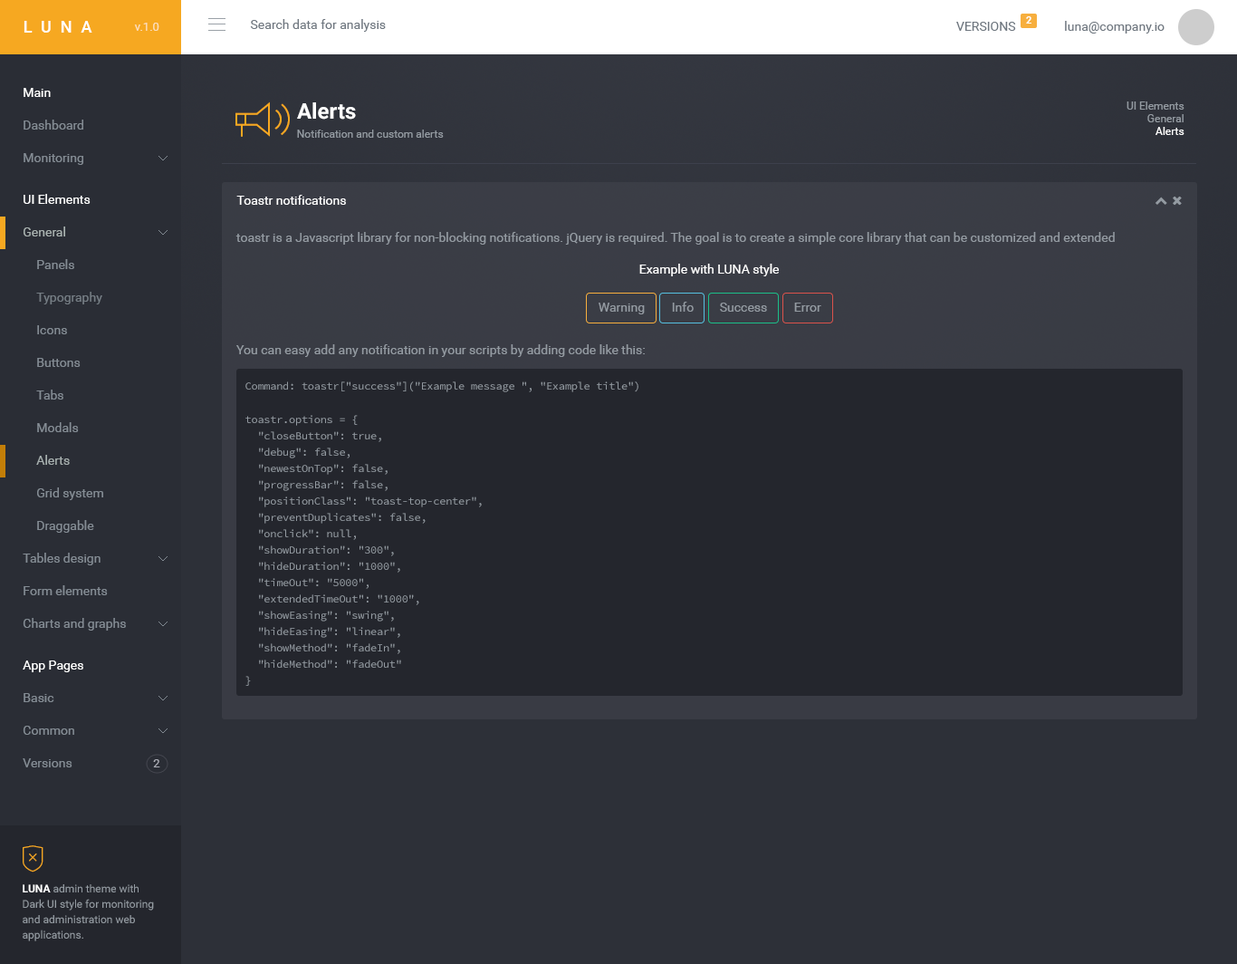
<style>
.page{position:relative;width:1237px;height:964px;background:#24262d}
.page>*{position:absolute;margin:0}
.t1{font:10px "Roboto-Bold";color:#ffffff}
.t2{font:16.3px "Roboto-Medium";letter-spacing:0.55em;color:#ffffff}
.t3{font:11.8px "Roboto-Regular";color:#fbdfbc}
.t4{font:12.7px "Roboto-Regular";color:#6f7780}
.t5{font:12.7px "Roboto-Regular";color:#ffffff}
.t6{font:10.9px/12.7px "Roboto-Regular";color:#949ba2}
.t7{font:10.9px/12.7px "Roboto-Regular";color:#ffffff}
.t8{font:21.7px "Roboto-Bold";color:#ffffff}
.t9{font:12.7px "Roboto-Regular";color:#848c94}
.t10{font:10.9px "Roboto-Regular";color:#949ba2}
.t11{font:12.7px "Roboto-Regular";color:#a9b2b0}
.t12{font:12.7px "Roboto-Regular";color:#949ba2}
.t13{font:12.7px "Roboto-Regular";color:#757d84}
.t14{font:10.9px/16.3px "SourceCodePro-Regular";letter-spacing:-0.023em;color:#949ba2}
.t15{font:10.9px "SourceCodePro-Regular";letter-spacing:-0.023em;color:#949ba2}
.t16{font:12.7px "Roboto-Regular";color:#a7b0af}
.t17{font:11.8px "Roboto-Regular";color:#aaacb5}
.t18{font:10.9px/15.4px "Roboto-Regular";color:#949ba2}
.t19{font:10.9px/15.4px "Roboto-Bold";color:#ffffff}
</style>
<div class="page">
<p class="t1" style="left:1026px;top:16px;width:6px;height:8px">2</p>
<p class="t2" style="left:24px;top:21px;width:68px;height:12px">LUNA</p>
<p class="t3" style="left:134px;top:23px;width:25px;height:8px">v.1.0</p>
<p class="t4" style="left:250px;top:19px;width:136px;height:13px">Search data for analysis</p>
<p class="t4" style="left:956px;top:22px;width:60px;height:9px">VERSIONS</p>
<p class="t4" style="left:1065px;top:21px;width:100px;height:13px">luna@company.io</p>
<p class="t5" style="left:24px;top:88px;width:27px;height:9px">Main</p>
<p class="t6" style="left:1127px;top:101px;width:58px;height:34px;text-align:right">UI Elements<br>General<br><span class="t7">Alerts</span></p>
<p class="t8" style="left:297px;top:102px;width:59px;height:18px">Alerts</p>
<p class="t9" style="left:24px;top:120px;width:59px;height:10px">Dashboard</p>
<p class="t10" style="left:297px;top:130px;width:147px;height:8px">Notification and custom alerts</p>
<p class="t9" style="left:24px;top:153px;width:59px;height:12px">Monitoring</p>
<p class="t5" style="left:24px;top:194px;width:67px;height:10px">UI Elements</p>
<p class="t5" style="left:236px;top:195px;width:110px;height:10px">Toastr notifications</p>
<p class="t11" style="left:24px;top:226px;width:41px;height:10px">General</p>
<p class="t12" style="left:236px;top:232px;width:879px;height:13px">toastr is a Javascript library for non-blocking notifications. jQuery is required. The goal is to create a simple core library that can be customized and extended</p>
<p class="t9" style="left:37px;top:259px;width:37px;height:10px">Panels</p>
<p class="t5" style="left:639px;top:264px;width:140px;height:12px">Example with LUNA style</p>
<p class="t13" style="left:36px;top:292px;width:66px;height:12px">Typography</p>
<p class="t12" style="left:599px;top:303px;width:46px;height:11px">Warning</p>
<p class="t12" style="left:672px;top:302px;width:22px;height:10px">Info</p>
<p class="t12" style="left:720px;top:303px;width:47px;height:9px">Success</p>
<p class="t12" style="left:794px;top:303px;width:28px;height:9px">Error</p>
<p class="t9" style="left:37px;top:325px;width:30px;height:9px">Icons</p>
<p class="t12" style="left:236px;top:344px;width:409px;height:13px">You can easy add any notification in your scripts by adding code like this:</p>
<p class="t9" style="left:37px;top:358px;width:44px;height:9px">Buttons</p>
<p class="t9" style="left:36px;top:389px;width:27px;height:10px">Tabs</p>
<p class="t14" style="left:245px;top:381px;width:394px;height:305px"><span class="t15">Command: toastr["success"]("Example message ", "Example title")<br><br><br></span>toastr.options = {<br>  "closeButton": true,<br>  "debug": false,<br>  "newestOnTop": false,<br>  "progressBar": false,<br>  "positionClass": "toast-top-center",<br>  "preventDuplicates": false,<br>  "onclick": null,<br>  "showDuration": "300",<br>  "hideDuration": "1000",<br>  "timeOut": "5000",<br>  "extendedTimeOut": "1000",<br>  "showEasing": "swing",<br>  "hideEasing": "linear",<br>  "showMethod": "fadeIn",<br>  "hideMethod": "fadeOut"<br>}</p>
<p class="t9" style="left:37px;top:422px;width:42px;height:10px">Modals</p>
<p class="t16" style="left:36px;top:455px;width:34px;height:10px">Alerts</p>
<p class="t9" style="left:37px;top:487px;width:66px;height:13px">Grid system</p>
<p class="t9" style="left:37px;top:520px;width:57px;height:13px">Draggable</p>
<p class="t9" style="left:23px;top:553px;width:78px;height:12px">Tables design</p>
<p class="t9" style="left:24px;top:585px;width:84px;height:10px">Form elements</p>
<p class="t9" style="left:23px;top:618px;width:103px;height:12px">Charts and graphs</p>
<p class="t5" style="left:23px;top:660px;width:60px;height:12px">App Pages</p>
<p class="t9" style="left:24px;top:693px;width:30px;height:9px">Basic</p>
<p class="t9" style="left:23px;top:726px;width:51px;height:9px">Common</p>
<p class="t9" style="left:23px;top:758px;width:49px;height:9px">Versions</p>
<p class="t17" style="left:153px;top:759px;width:7px;height:8px">2</p>
<p class="t18" style="left:23px;top:884px;width:131px;height:57px"><span class="t19">LUNA </span>admin theme with Dark UI style for monitoring and administration web applications.</p>
</div>
